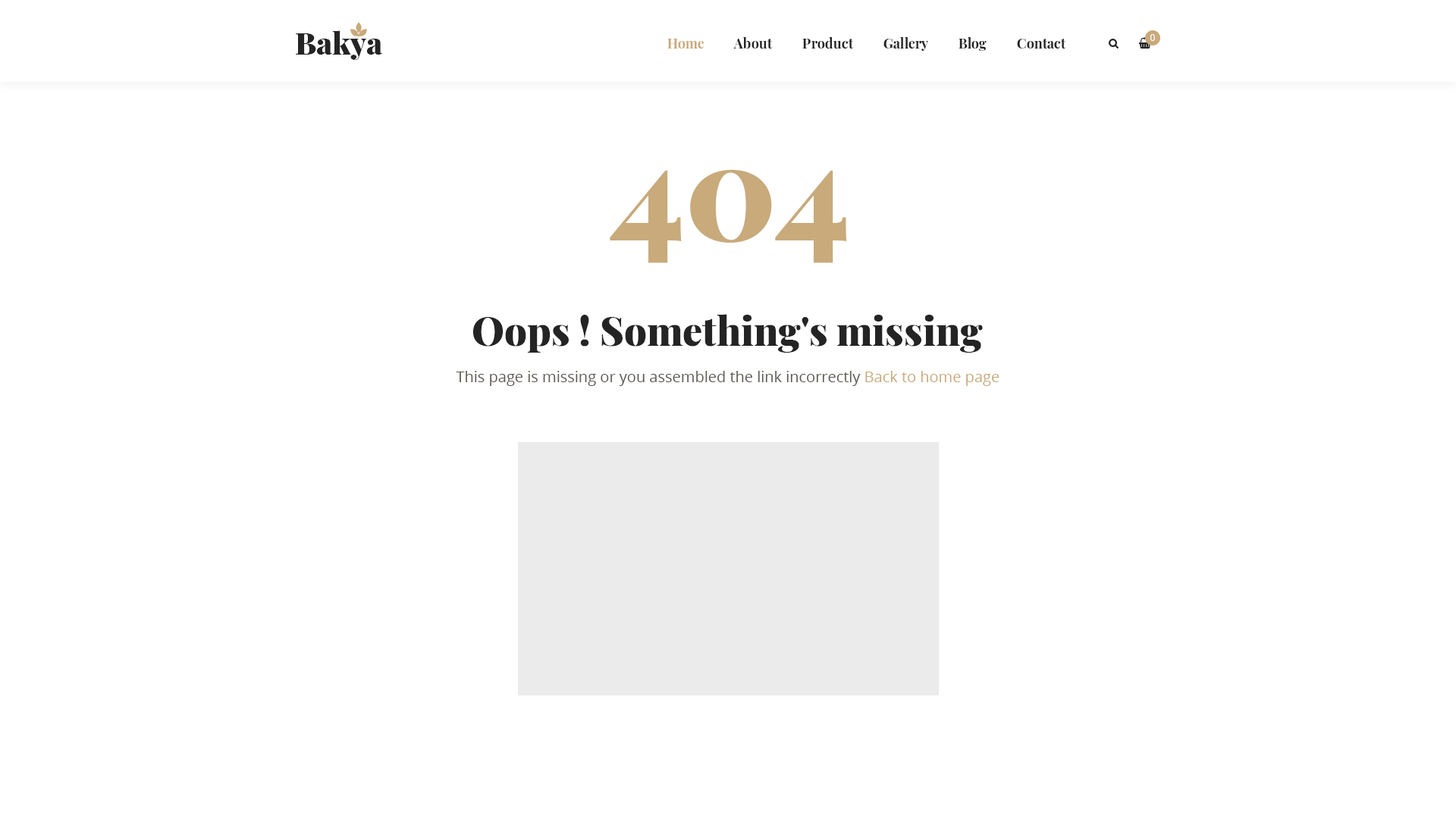
<style>
.page{position:relative;width:1456px;height:819px;background:#ffffff}
.page>*{position:absolute;margin:0}
.t1{font:30.3px "PlayfairDisplay-Black";color:#242424}
.t2{font:13.6px "PlayfairDisplay-Bold";color:#242424}
.t3{font:13.6px "PlayfairDisplay-Bold";color:#c8aa7b}
.t4{font:9.1px "OpenSans-Regular";color:#ffffff;text-transform:uppercase}
.t5{font:136.5px "PlayfairDisplay-Black";color:#c8aa7b}
.t6{font:39.4px "PlayfairDisplay-Black";color:#242424}
.t7{font:15.2px "OpenSans-Regular";color:#5e5a54}
.t8{font:15.2px "OpenSans-Regular";color:#c8aa7b}
</style>
<div class="page">
<p class="t1" style="left:296px;top:30px;width:86px;height:30px">Bakya</p>
<p class="t2" style="left:667px;top:36px;width:399px;height:15px"><span class="t3">Home          </span>About          Product          Gallery          Blog          Contact</p>
<p class="t4" style="left:1150px;top:34px;width:5px;height:7px">0</p>
<p class="t5" style="left:610px;top:170px;width:237px;height:93px">404</p>
<p class="t6" style="left:472px;top:314px;width:511px;height:39px">Oops ! Something's missing</p>
<p class="t7" style="left:456px;top:371px;width:543px;height:15px">This page is missing or you assembled the link incorrectly <span class="t8">Back to home page</span></p>
</div>
